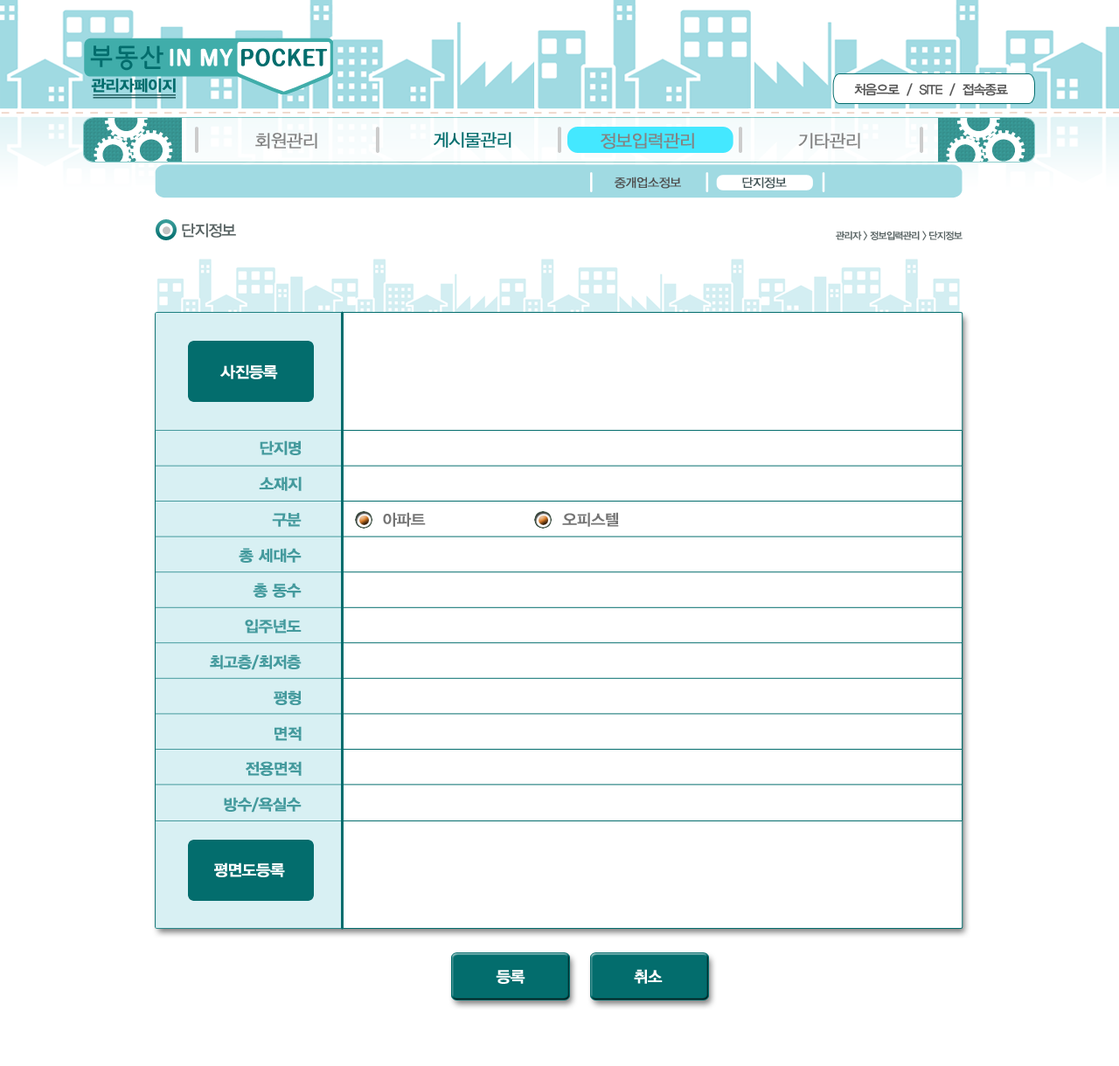
<style>
.page{position:relative;width:1119px;height:1066px;background:#ffffff}
.page>*{position:absolute;margin:0}
.t1{font:15.6px "YDIYGO340";letter-spacing:-0.04em;color:#036d6d;font-weight:bold}
.t2{font:13.1px "YDIYGO330";letter-spacing:-0.06em;color:#535353}
.t3{font:17.5px "YDIYGO320";letter-spacing:-0.04em;color:#838383;font-weight:bold}
.t4{font:17.5px "YDIYGO320";letter-spacing:-0.04em;color:#036d6d;font-weight:bold}
.t5{font:12.2px "YDIYGO320";letter-spacing:-0.04em;color:#4f4f4f;font-weight:bold}
.t6{font:12.2px "YDIYGO320";letter-spacing:-0.04em;color:#445658;font-weight:bold}
.t7{font:15.7px "YDIYGO330";letter-spacing:-0.06em;color:#576262}
.t8{font:9.6px "YDIYGO330";letter-spacing:-0.06em;color:#576262}
.t9{font:15.6px "YDIYGO340";letter-spacing:-0.04em;color:#ffffff;font-weight:bold}
.t10{font:15.6px "YDIYGO340";letter-spacing:-0.04em;color:#449a9d;font-weight:bold}
.t11{font:15.6px "YDIYGO330";letter-spacing:-0.04em;color:#747474;font-weight:bold}
</style>
<div class="page">
<p class="t1" style="left:91px;top:78px;width:85px;height:15px">관리자페이지</p>
<p class="t2" style="left:854px;top:83px;width:154px;height:13px">처음으로  /  SITE  /  접속종료</p>
<p class="t3" style="left:255px;top:133px;width:62px;height:16px">회원관리</p>
<p class="t4" style="left:433px;top:132px;width:78px;height:16px">게시물관리</p>
<p class="t3" style="left:600px;top:133px;width:94px;height:16px">정보입력관리</p>
<p class="t3" style="left:798px;top:133px;width:62px;height:16px">기타관리</p>
<p class="t5" style="left:614px;top:177px;width:67px;height:12px">중개업소정보</p>
<p class="t6" style="left:742px;top:177px;width:44px;height:12px">단지정보</p>
<p class="t7" style="left:182px;top:223px;width:54px;height:15px">단지정보</p>
<p class="t8" style="left:835px;top:231px;width:127px;height:10px">관리자 &gt; 정보입력관리 &gt; 단지정보</p>
<p class="t9" style="left:220px;top:364px;width:58px;height:15px">사진등록</p>
<p class="t10" style="left:260px;top:440px;width:41px;height:15px">단지명</p>
<p class="t10" style="left:259px;top:476px;width:42px;height:15px">소재지</p>
<p class="t10" style="left:272px;top:513px;width:29px;height:14px">구분</p>
<p class="t11" style="left:383px;top:512px;width:43px;height:15px">아파트</p>
<p class="t11" style="left:562px;top:512px;width:57px;height:15px">오피스텔</p>
<p class="t10" style="left:239px;top:548px;width:62px;height:15px">총 세대수</p>
<p class="t10" style="left:253px;top:583px;width:48px;height:15px">총 동수</p>
<p class="t10" style="left:245px;top:619px;width:56px;height:15px">입주년도</p>
<p class="t10" style="left:210px;top:655px;width:91px;height:15px">최고층/최저층</p>
<p class="t10" style="left:274px;top:690px;width:27px;height:15px">평형</p>
<p class="t10" style="left:274px;top:726px;width:27px;height:15px">면적</p>
<p class="t10" style="left:246px;top:761px;width:55px;height:15px">전용면적</p>
<p class="t10" style="left:224px;top:797px;width:77px;height:16px">방수/욕실수</p>
<p class="t9" style="left:214px;top:862px;width:71px;height:15px">평면도등록</p>
<p class="t9" style="left:495px;top:970px;width:30px;height:14px">등록</p>
<p class="t9" style="left:634px;top:969px;width:28px;height:15px">취소</p>
</div>
